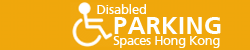
<style>
.page{position:relative;width:250px;height:50px;background:#f0a70c}
.page>*{position:absolute;margin:0}
.t1{font:12.5px "Articulate";color:#feffff}
.t2{font:25px "Articulate-Bold";letter-spacing:0.01em;color:#feffff}
.t3{font:12.5px "Articulate";letter-spacing:-0.01em;color:#feffff}
</style>
<div class="page">
<p class="t1" style="left:97px;top:4px;width:49px;height:10px">Disabled</p>
<p class="t2" style="left:114px;top:17px;width:107px;height:17px">PARKING</p>
<p class="t3" style="left:113px;top:36px;width:107px;height:12px">Spaces Hong Kong</p>
</div>
